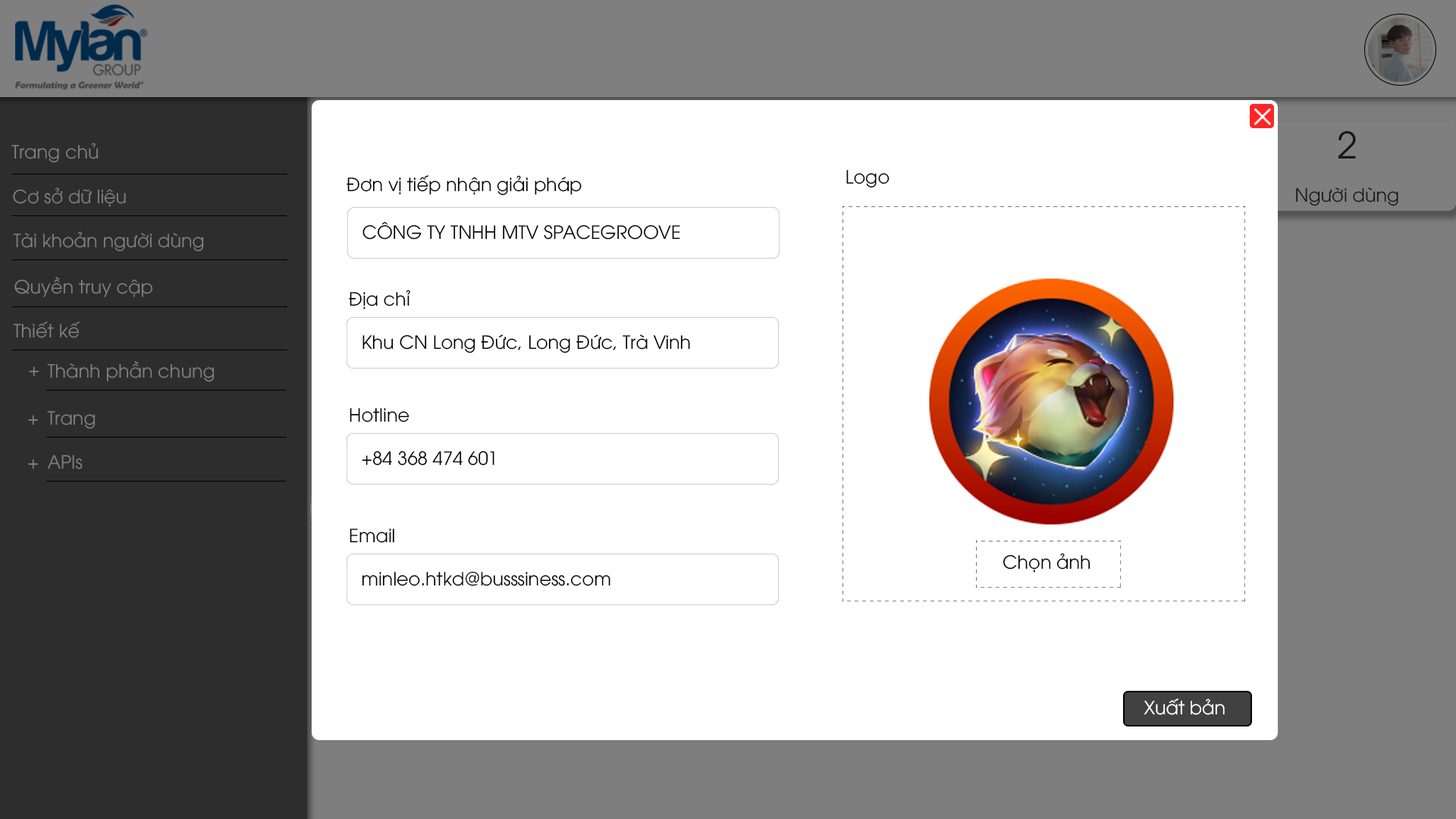
<style>
.page{position:relative;width:1456px;height:819px;background:#ffffff}
.page>*{position:absolute;margin:0}
.t1{font:18.2px "UTM-Avo";color:#2f2f2f}
.t2{font:36.4px "UTM-Avo";color:#2f2f2f}
.t3{font:18.2px "UTM-Avo";color:#000000}
.t4{font:18.2px "UTM-Avo";color:#7f7f7f}
</style>
<div class="page">
<p class="t1" style="left:1296px;top:130px;width:102px;height:76px;text-align:center"><span class="t2">2<br></span><br>Người dùng</p>
<p class="t3" style="left:846px;top:170px;width:44px;height:18px">Logo</p>
<p class="t3" style="left:347px;top:175px;width:235px;height:21px">Đơn vị tiếp nhận giải pháp</p>
<p class="t3" style="left:362px;top:221px;width:318px;height:19px">CÔNG TY TNHH MTV SPACEGROOVE</p>
<p class="t3" style="left:349px;top:290px;width:61px;height:19px">Địa chỉ</p>
<p class="t3" style="left:362px;top:334px;width:328px;height:19px">Khu CN Long Đức, Long Đức, Trà Vinh</p>
<p class="t4" style="left:29px;top:366px;width:10px;height:11px">+</p>
<p class="t3" style="left:350px;top:408px;width:59px;height:14px">Hotline</p>
<p class="t4" style="left:28px;top:415px;width:10px;height:10px">+</p>
<p class="t4" style="left:28px;top:459px;width:10px;height:10px">+</p>
<p class="t3" style="left:362px;top:450px;width:132px;height:16px">+84 368 474 601</p>
<p class="t3" style="left:350px;top:529px;width:44px;height:14px">Email</p>
<p class="t3" style="left:1003px;top:553px;width:87px;height:20px">Chọn ảnh</p>
<p class="t3" style="left:362px;top:571px;width:248px;height:15px">minleo.htkd@busssiness.com</p>
</div>
